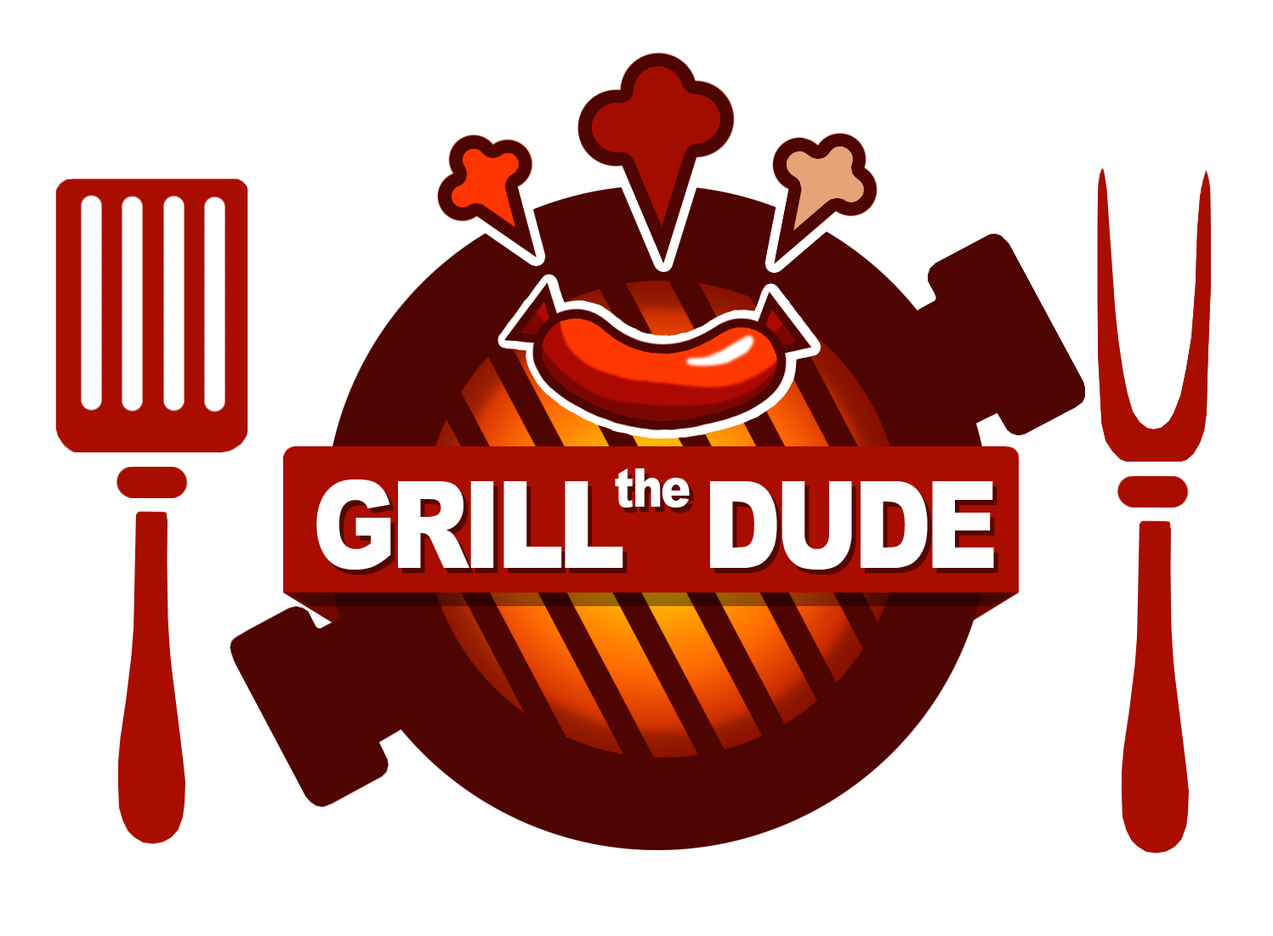
<style>
.page{position:relative;width:1273px;height:936px;background:#ffffff}
.page>*{position:absolute;margin:0}
.t1{font:53.2px "Arial-Black";letter-spacing:-0.035em;color:#ffffff;scale:0.84 1}
.t2{font:120.5px "Arial-Black";letter-spacing:-0.06em;color:#ffffff;scale:0.84 1}
</style>
<div class="page">
<p class="t1" style="left:615px;top:469px;width:75px;height:39px">the</p>
<p class="t2" style="left:316px;top:480px;width:678px;height:90px">GRILL   DUDE</p>
</div>
